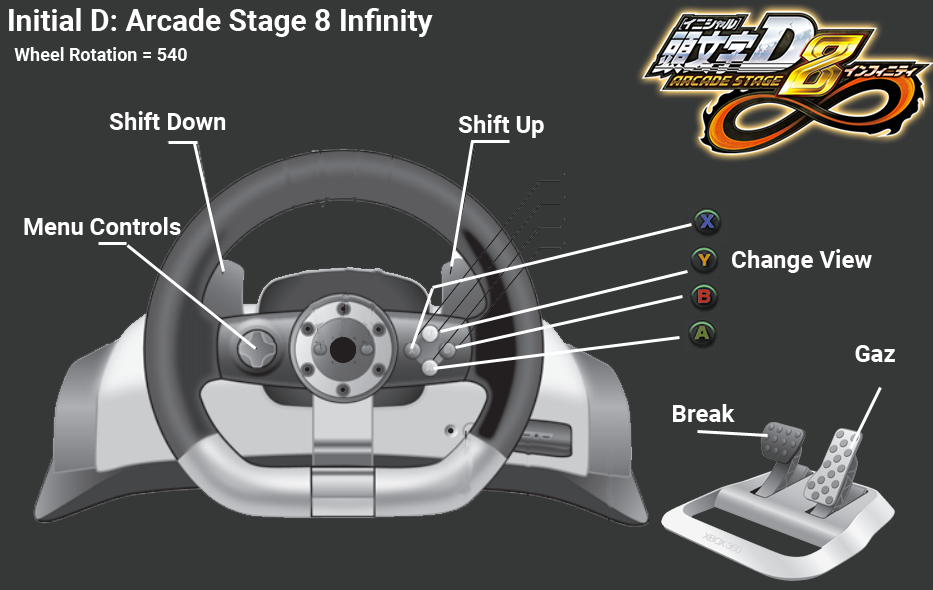
<style>
.page{position:relative;width:933px;height:590px;background:#363838}
.page>*{position:absolute;margin:0}
.t1{font:30px "Roboto-Bold";color:#ffffff}
.t2{font:18px "Roboto-Bold";color:#ffffff}
.t3{font:24px "Roboto-Bold";color:#ffffff}
</style>
<div class="page">
<p class="t1" style="left:9px;top:8px;width:424px;height:29px">Initial D: Arcade Stage 8 Infinity</p>
<p class="t2" style="left:14px;top:47px;width:173px;height:14px">Wheel Rotation = 540</p>
<p class="t3" style="left:109px;top:111px;width:117px;height:19px">Shift Down</p>
<p class="t3" style="left:458px;top:114px;width:86px;height:24px">Shift Up</p>
<p class="t3" style="left:24px;top:217px;width:157px;height:18px">Menu Controls</p>
<p class="t3" style="left:732px;top:249px;width:140px;height:24px">Change View</p>
<p class="t3" style="left:855px;top:345px;width:40px;height:17px">Gaz</p>
<p class="t3" style="left:673px;top:404px;width:62px;height:18px">Break</p>
</div>
